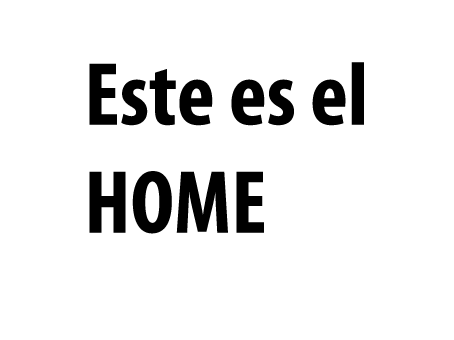
<style>
.page{position:relative;width:454px;height:340px;background:#ffffff}
.page>*{position:absolute;margin:0}
.t1{font:90px "MyriadPro-BoldCond";color:#000000}
</style>
<div class="page">
<p class="t1" style="left:89px;top:62px;width:275px;height:172px">Este es el<br>HOME</p>
</div>
